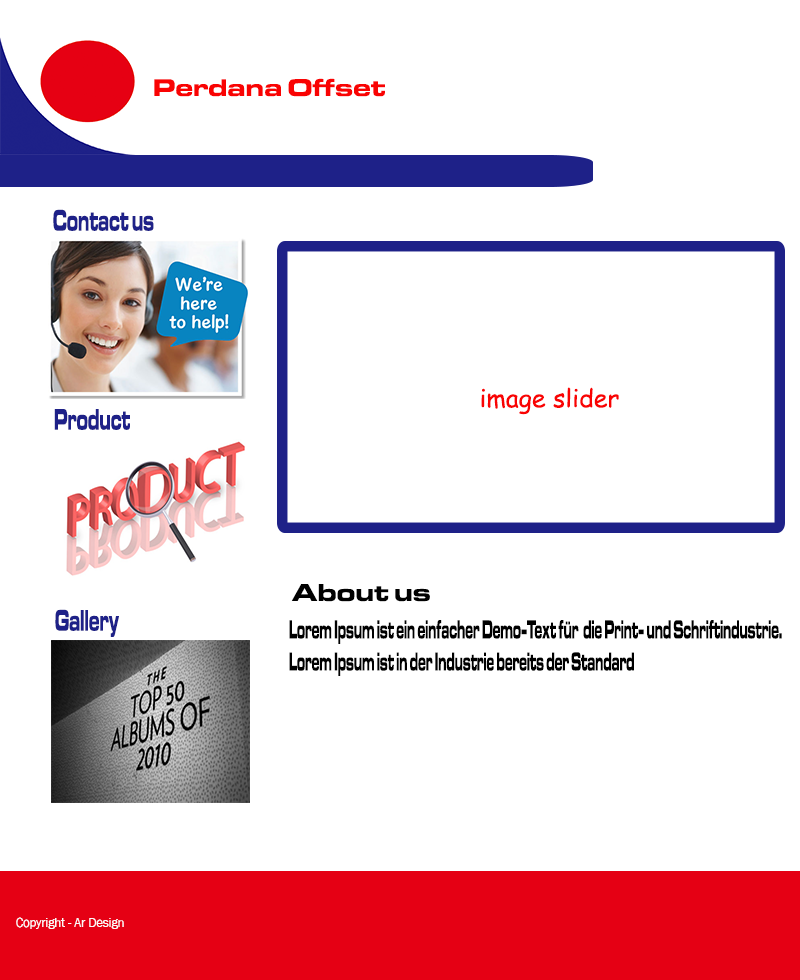
<style>
.page{position:relative;width:800px;height:980px;background:#ffffff}
.page>*{position:absolute;margin:0}
.t1{font:25px "EurostileMN-ExtendedBold";color:#f90303}
.t2{font:30.6px "EurostileMN-ExtendedBold";color:#1e2188;scale:0.49 1}
.t3{font:25px "ComicSansMS";color:#f90303}
.t4{font:25px "EurostileMN-ExtendedBold";color:#010101}
.t5{font:26.7px "EurostileMN-ExtendedBold";color:#000000;scale:0.41 1}
.t6{font:12.5px "FranklinGothic-Book";color:#fcf9f9}
</style>
<div class="page">
<p class="t1" style="left:154px;top:78px;width:231px;height:19px">Perdana Offset</p>
<p class="t2" style="left:53px;top:209px;width:101px;height:22px">Contact us</p>
<p class="t3" style="left:481px;top:387px;width:138px;height:28px">image slider</p>
<p class="t2" style="left:54px;top:409px;width:76px;height:21px">Product</p>
<p class="t4" style="left:291px;top:584px;width:139px;height:18px">About us</p>
<p class="t2" style="left:55px;top:609px;width:64px;height:28px">Gallery</p>
<p class="t5" style="left:289px;top:620px;width:493px;height:56px">Lorem Ipsum ist ein einfacher Demo-Text für  die Print- und Schriftindustrie. <br>Lorem Ipsum ist in der Industrie bereits der Standard</p>
<p class="t6" style="left:16px;top:917px;width:108px;height:12px">Copyright - Ar Design</p>
</div>
